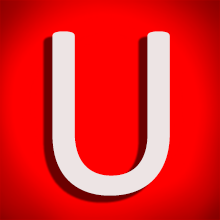
<style>
.page{position:relative;width:220px;height:220px;background:#ff0000}
.page>*{position:absolute;margin:0}
.t1{font:252.1px "Calibri";color:#ececec;font-weight:bold;scale:0.96 1}
</style>
<div class="page">
<p class="t1" style="left:52px;top:31px;width:118px;height:165px">U</p>
</div>
